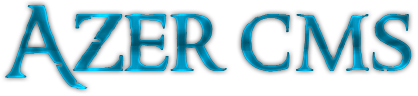
<style>
.page{position:relative;width:418px;height:96px;background:#ffffff}
.page>*{position:absolute;margin:0}
.t1{font:90px "RingbearerMedium"}
</style>
<div class="page">
<p class="t1" style="left:5px;top:5px;width:407px;height:85px">Azer cms</p>
</div>
